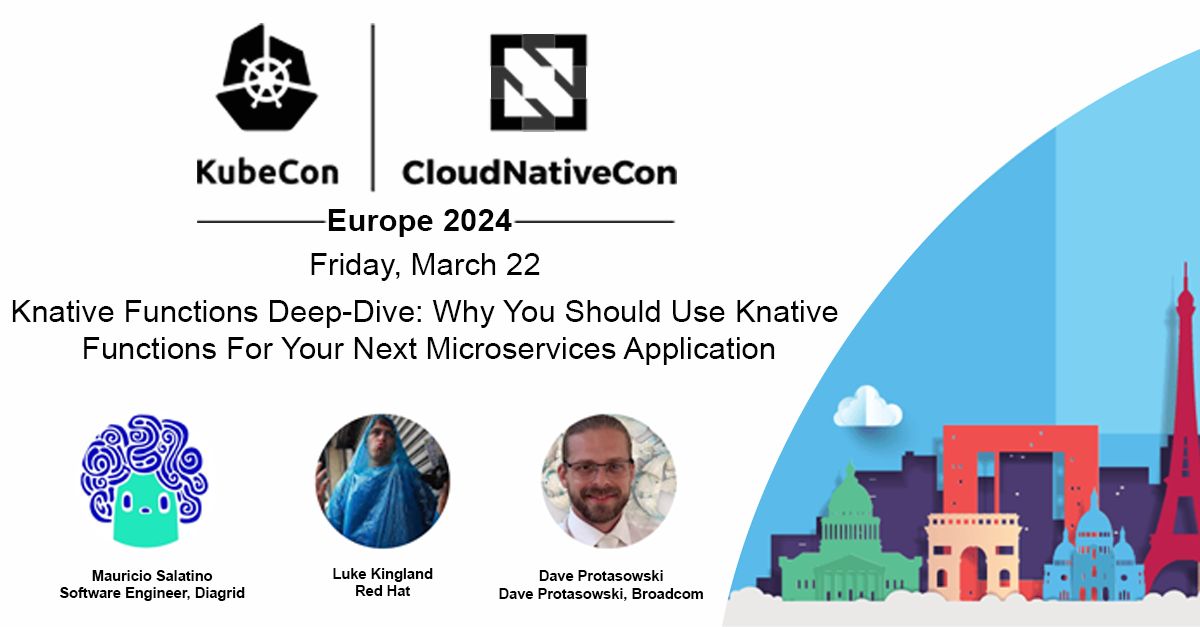
<style>
.page{position:relative;width:1200px;height:627px;background:#fefefe}
.page>*{position:absolute;margin:0}
.t1{font:31.2px "Arial-BoldMT";color:#020202}
.t2{font:31.2px "ArialMT";color:#020202}
.t3{font:14.6px "Arial-BoldMT";color:#000000}
</style>
<div class="page">
<p class="t1" style="left:328px;top:209px;width:184px;height:28px">Europe 2024</p>
<p class="t2" style="left:311px;top:253px;width:229px;height:28px">Friday, March 22</p>
<p class="t2" style="left:12px;top:300px;width:826px;height:65px;text-align:center">Knative Functions Deep-Dive: Why You Should Use Knative<br> Functions For Your Next Microservices Application</p>
<p class="t3" style="left:333px;top:568px;width:100px;height:28px;text-align:center">Luke Kingland<br>Red Hat</p>
<p class="t3" style="left:60px;top:570px;width:185px;height:31px;text-align:center">Mauricio Salatino<br>Software Engineer, Diagrid</p>
<p class="t3" style="left:499px;top:570px;width:204px;height:31px;text-align:center">Dave Protasowski<br>Dave Protasowski, Broadcom</p>
</div>
